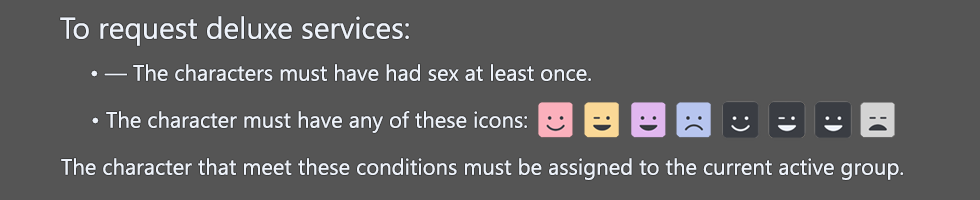
<style>
.page{position:relative;width:980px;height:200px;background:#555555}
.page>*{position:absolute;margin:0}
.t1{font:30px "YuGothicUI-Regular";color:#edf2fa}
.t2{font:22px "YuGothicUI-Regular";color:#edf2fa}
</style>
<div class="page">
<p class="t1" style="left:60px;top:16px;width:349px;height:30px">To request deluxe services:</p>
<p class="t2" style="left:91px;top:64px;width:500px;height:17px">• — The characters must have had sex at least once.</p>
<p class="t2" style="left:92px;top:111px;width:435px;height:22px">• The character must have any of these icons:</p>
<p class="t2" style="left:61px;top:158px;width:843px;height:22px">The character that meet these conditions must be assigned to the current active group.</p>
</div>
